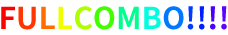
<style>
.page{position:relative;width:228px;height:35px;background:#ffffff}
.page>*{position:absolute;margin:0}
.t1{font:30px "NotoSansHant-Bold";color:#ff0000}
.t2{font:30px "NotoSansHant-Bold";color:#ff3600}
.t3{font:30px "NotoSansHant-Bold";color:#ff6c00}
.t4{font:30px "NotoSansHant-Bold";color:#f0ff00}
.t5{font:30px "NotoSansHant-Bold";color:#aeff00}
.t6{font:30px "NotoSansHant-Bold";color:#42ff00}
.t7{font:30px "NotoSansHant-Bold";color:#00ff90}
.t8{font:30px "NotoSansHant-Bold";color:#00ffde}
.t9{font:30px "NotoSansHant-Bold";color:#0078ff}
.t10{font:30px "NotoSansHant-Bold";color:#003cff}
.t11{font:30px "NotoSansHant-Bold";color:#001eff}
.t12{font:30px "NotoSansHant-Bold";color:#4800ff}
.t13{font:30px "NotoSansHant-Bold";color:#6000ff}
</style>
<div class="page">
<p class="t1" style="left:1px;top:6px;width:226px;height:24px">F<span class="t2">U</span><span class="t3">L</span><span class="t4">L</span><span class="t5">C</span><span class="t6">O</span><span class="t7">M</span><span class="t8">B</span><span class="t9">O</span><span class="t10">!</span><span class="t11">!</span><span class="t12">!</span><span class="t13">!</span></p>
</div>
